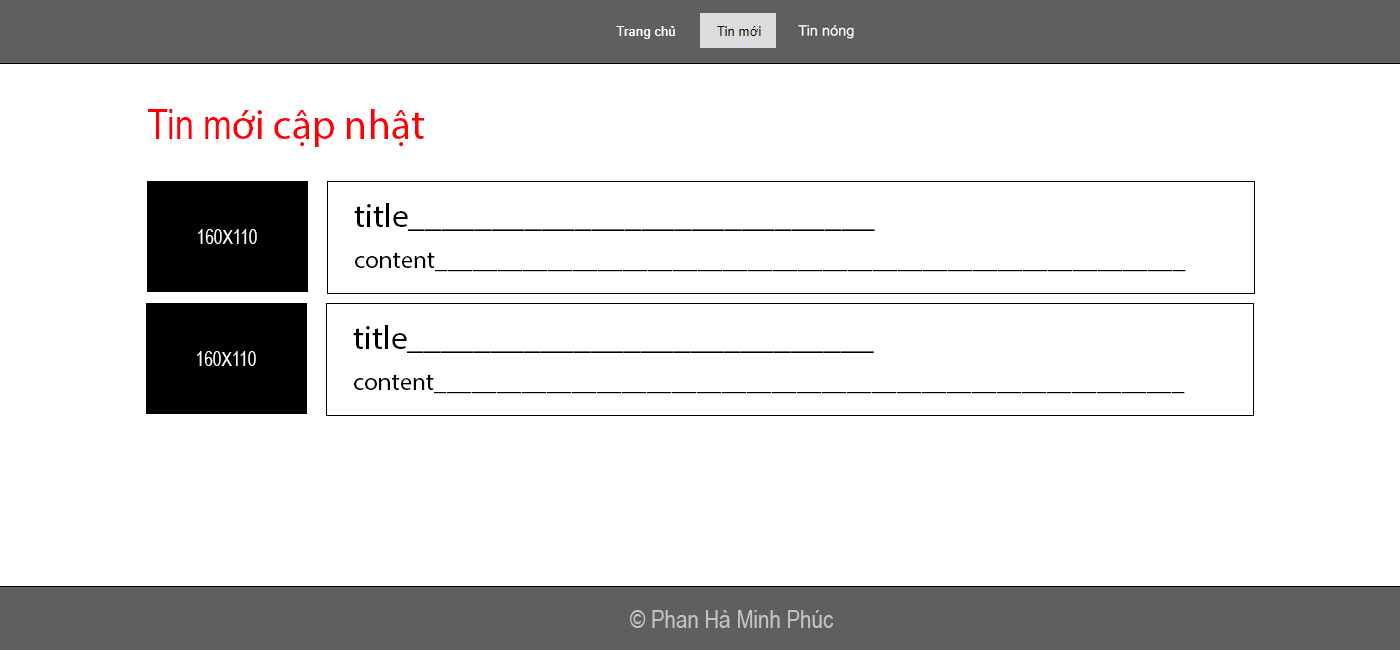
<style>
.page{position:relative;width:1400px;height:650px;background:#ffffff}
.page>*{position:absolute;margin:0}
.t1{font:41.7px "MyriadPro-Regular";color:#ff0004}
.t2{font:41.7px "ArialNarrow";color:#ff0004}
.t3{font:33.3px "MyriadPro-Regular";color:#000000}
.t4{font:18.9px "ArialNarrow";color:#ffffff}
.t5{font:18.9px "ArialNarrow";color:#000000}
.t6{font:25px "MyriadPro-Regular";color:#000000}
.t7{font:25px "ArialNarrow";color:#c2c2c2}
</style>
<div class="page">
<p class="t1" style="left:147px;top:109px;width:277px;height:38px"><span class="t2">Tin m</span>ới cập nhật</p>
<p class="t3" style="left:354px;top:203px;width:521px;height:28px">title____________________________</p>
<p class="t4" style="left:198px;top:229px;width:59px;height:15px"><span class="t5"><br></span>160X110</p>
<p class="t6" style="left:355px;top:252px;width:831px;height:20px">content____________________________________________________________</p>
<p class="t3" style="left:353px;top:325px;width:521px;height:28px">title____________________________</p>
<p class="t4" style="left:197px;top:351px;width:59px;height:15px"><span class="t5"><br></span>160X110</p>
<p class="t6" style="left:354px;top:374px;width:831px;height:20px">content____________________________________________________________</p>
<p class="t7" style="left:630px;top:610px;width:203px;height:18px">© Phan Hà Minh Phúc</p>
</div>
